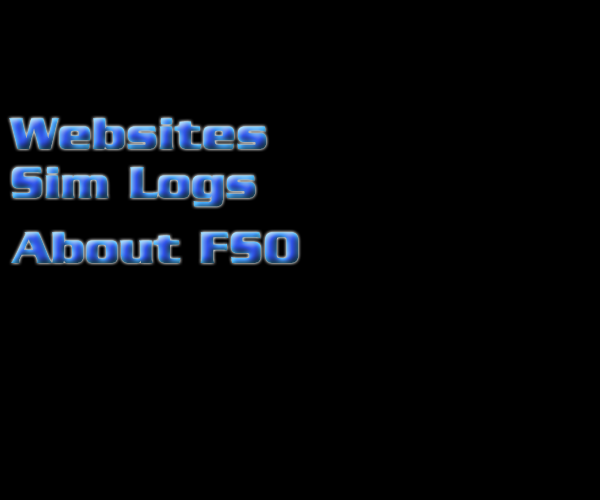
<style>
.page{position:relative;width:600px;height:500px;background:#000000}
.page>*{position:absolute;margin:0}
.t1{font:48px "Babylon5"}
</style>
<div class="page">
<p class="t1" style="left:9px;top:118px;width:258px;height:31px">Websites</p>
<p class="t1" style="left:12px;top:167px;width:244px;height:40px">Sim Logs</p>
<p class="t1" style="left:11px;top:232px;width:288px;height:31px">About FSO</p>
</div>
